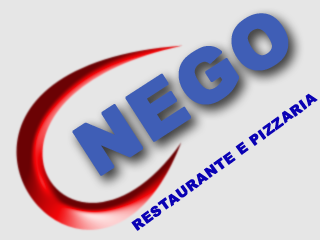
<style>
.page{position:relative;width:320px;height:240px;background:#e6e6e6}
.page>*{position:absolute;margin:0}
.t1{font:72px "Arial-Black";letter-spacing:0.02em;color:#3f5eb6;font-weight:bold}
.t2{font:14px "Arial-Black";letter-spacing:0.02em;color:#0a01b4;font-weight:bold}
</style>
<div class="page">
<p class="t1" style="left:72px;top:13px;width:217px;height:163px;rotate:-33deg">NEGO</p>
<p class="t2" style="left:131px;top:93px;width:187px;height:138px;rotate:-36deg">RESTAURANTE E PIZZARIA</p>
</div>
